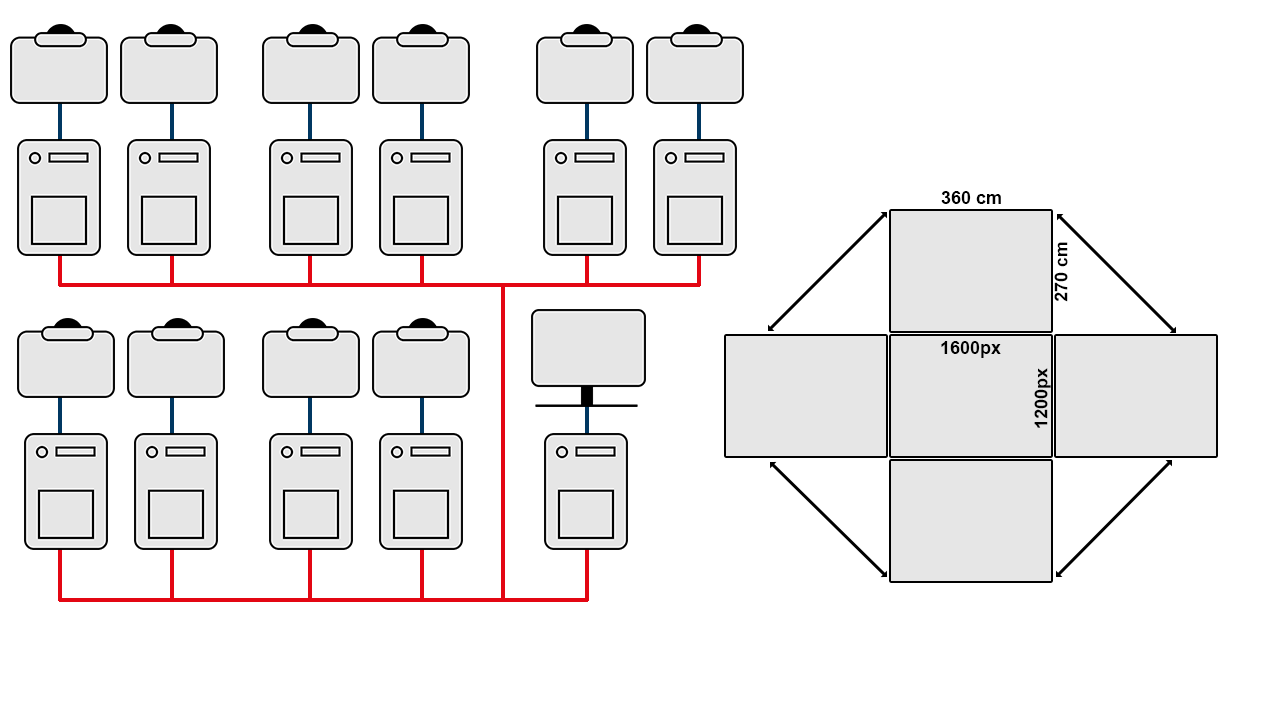
<style>
.page{position:relative;width:1280px;height:720px;background:#ffffff}
.page>*{position:absolute;margin:0}
.t1{font:17.8px "Arial-BoldMT";color:#000000}
.t2{font:18px "Arial-BoldMT";color:#000000}
</style>
<div class="page">
<p class="t1" style="left:941px;top:191px;width:60px;height:13px">360 cm</p>
<p class="t1" style="left:1054px;top:242px;width:14px;height:60px;rotate:-90deg">270 cm</p>
<p class="t2" style="left:941px;top:341px;width:60px;height:17px">1600px</p>
<p class="t1" style="left:1034px;top:368px;width:17px;height:60px;rotate:-90deg">1200px</p>
</div>
